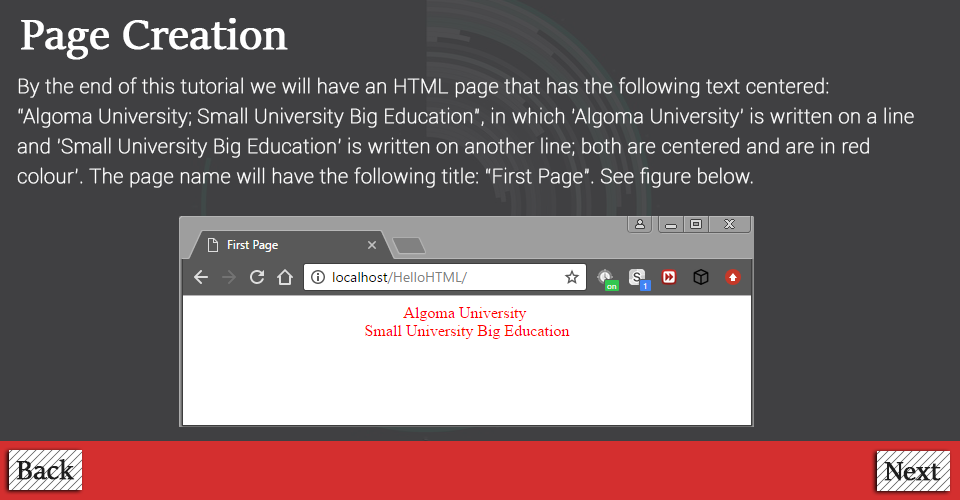
<style>
.page{position:relative;width:960px;height:500px;background:#404042}
.page>*{position:absolute;margin:0}
.t1{font:48px "SitkaBanner";color:#ffffff;font-weight:bold}
.t2{font:20px/30px "Roboto-Thin";color:#ffffff;font-weight:bold}
.t3{font:30px "SitkaBanner";color:#1e1e1e;font-weight:bold}
</style>
<div class="page">
<p class="t1" style="left:21px;top:18px;width:267px;height:42px">Page Creation</p>
<p class="t2" style="left:17px;top:77px;width:897px;height:111px">By the end of this tutorial we will have an HTML page that has the following text centered: <br>“Algoma University; Small University Big Education”, in which 'Algoma University' is written on a line and 'Small University Big Education' is written on another line; both are centered and are in red colour’. The page name will have the following title: “First Page”. See figure below.</p>
<p class="t3" style="left:16px;top:459px;width:59px;height:21px">Back</p>
<p class="t3" style="left:884px;top:462px;width:57px;height:19px">Next</p>
</div>
